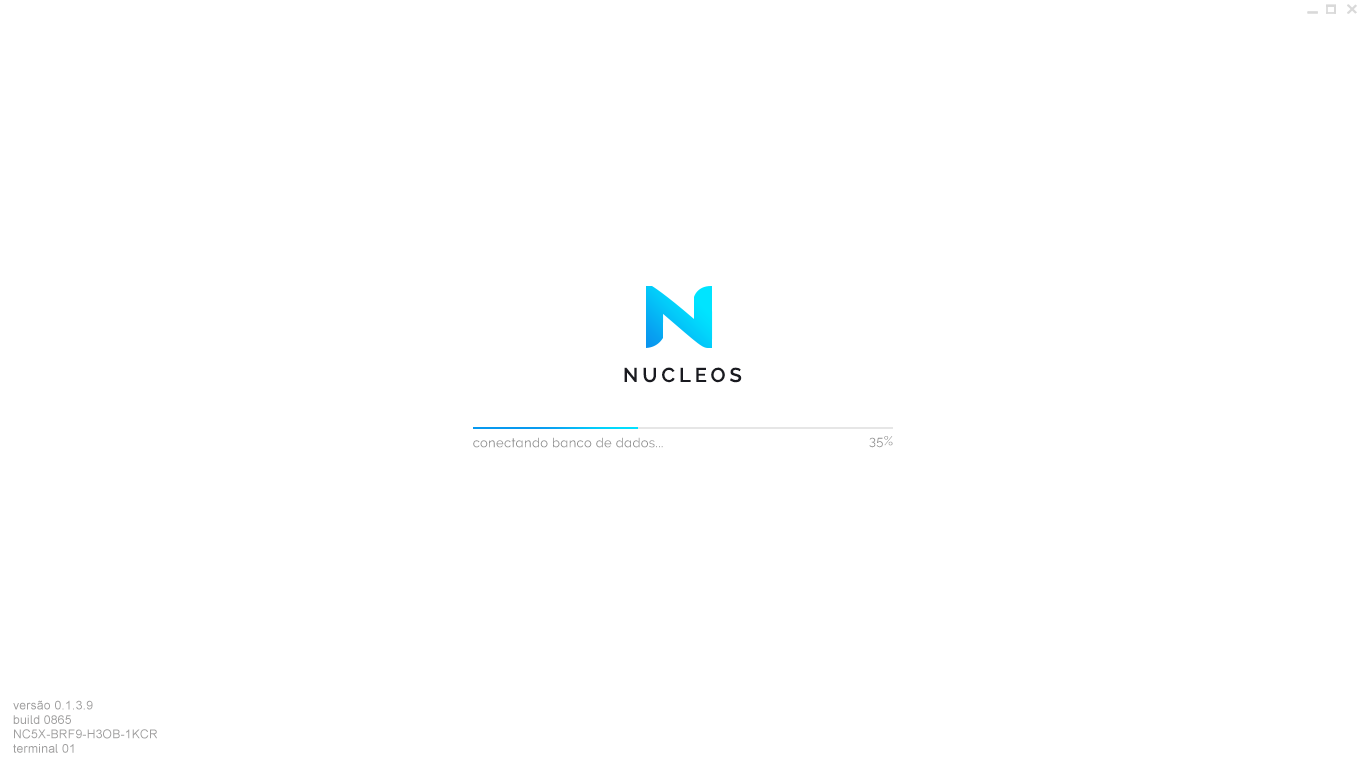
<style>
.page{position:relative;width:1366px;height:768px;background:#ffffff}
.page>*{position:absolute;margin:0}
.t1{font:20px "Raleway-SemiBold";letter-spacing:0.2em;color:#191a20;text-transform:uppercase}
.t2{font:13px "Raleway-Regular";letter-spacing:0.025em;color:#8b8b8b}
.t3{font:13px "Raleway-Regular";letter-spacing:0.025em}
.t4{font:12px "ArialMT";letter-spacing:0.025em;color:#9f9e9e}
</style>
<div class="page">
<p class="t1" style="left:624px;top:367px;width:118px;height:16px">Nucleos</p>
<p class="t2" style="left:473px;top:437px;width:190px;height:11px">conectando banco de dados...</p>
<p class="t3" style="left:869px;top:436px;width:24px;height:12px">35%</p>
<p class="t4" style="left:13px;top:700px;width:144px;height:53px">versão 0.1.3.9<br>build 0865<br>NC5X-BRF9-H3OB-1KCR<br>terminal 01</p>
</div>
